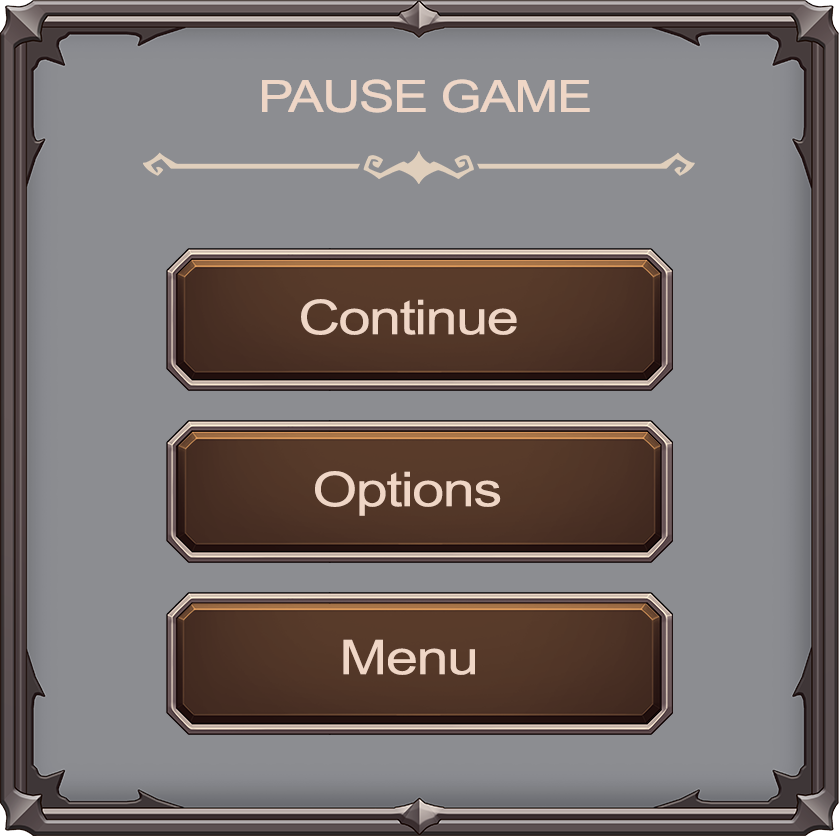
<style>
.page{position:relative;width:839px;height:836px;background:#8c8d91}
.page>*{position:absolute;margin:0}
.t1{font:44.1px "ArialMT";letter-spacing:-0.025em;color:#efd6c6;scale:1.2 1}
.t2{font:48px "ArialMT";letter-spacing:-0.025em;color:#efd6c6;scale:1.2 1}
</style>
<div class="page">
<p class="t1" style="left:262px;top:79px;width:328px;height:34px">PAUSE GAME</p>
<p class="t2" style="left:301px;top:299px;width:216px;height:36px">Continue</p>
<p class="t2" style="left:315px;top:471px;width:186px;height:45px">Options</p>
<p class="t2" style="left:343px;top:639px;width:132px;height:36px">Menu</p>
</div>
